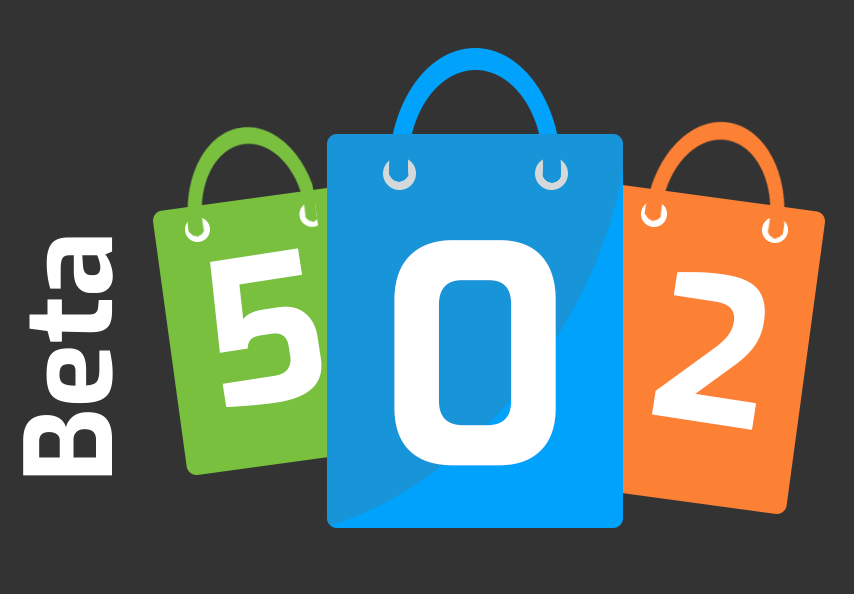
<style>
.page{position:relative;width:854px;height:594px;background:#333333}
.page>*{position:absolute;margin:0}
.t1{font:120px "Exo-Bold";color:#ffffff}
.t2{font:300px "Exo-Bold";color:#ffffff}
.t3{font:200px "Exo-Bold";color:#ffffff}
</style>
<div class="page">
<p class="t1" style="left:23px;top:237px;width:90px;height:239px;rotate:-90deg">Beta</p>
<p class="t2" style="left:394px;top:240px;width:162px;height:226px">0</p>
<p class="t3" style="left:210px;top:248px;width:112px;height:160px;rotate:-9deg">5</p>
<p class="t3" style="left:652px;top:272px;width:113px;height:158px;rotate:9deg">2</p>
</div>
